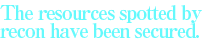
<style>
.page{position:relative;width:202px;height:42px;background:#ffffff}
.page>*{position:absolute;margin:0}
.t1{font:20px/18px "RyuminPro-ExBold";letter-spacing:-0.08em;color:#65f9fc}
</style>
<div class="page">
<p class="t1" style="left:0px;top:5px;width:202px;height:34px">The resources spotted by<br>recon have been secured.</p>
</div>
